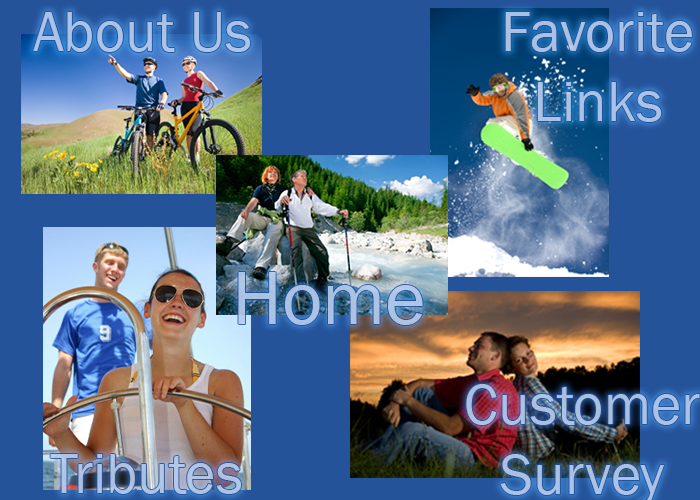
<style>
.page{position:relative;width:700px;height:500px;background:#24539a}
.page>*{position:absolute;margin:0}
.t1{font:58.3px "FranklinGothic-Book";color:#b4ccef}
.t2{font:77.8px "FranklinGothic-Book";color:#b4ccef}
</style>
<div class="page">
<p class="t1" style="left:33px;top:12px;width:218px;height:40px;opacity:0.9">About Us</p>
<p class="t1" style="left:505px;top:12px;width:187px;height:110px;text-align:center;opacity:0.9">Favorite<br>Links</p>
<p class="t2" style="left:238px;top:272px;width:185px;height:53px;opacity:0.9">Home</p>
<p class="t1" style="left:50px;top:454px;width:192px;height:40px;opacity:0.9">Tributes</p>
</div>
